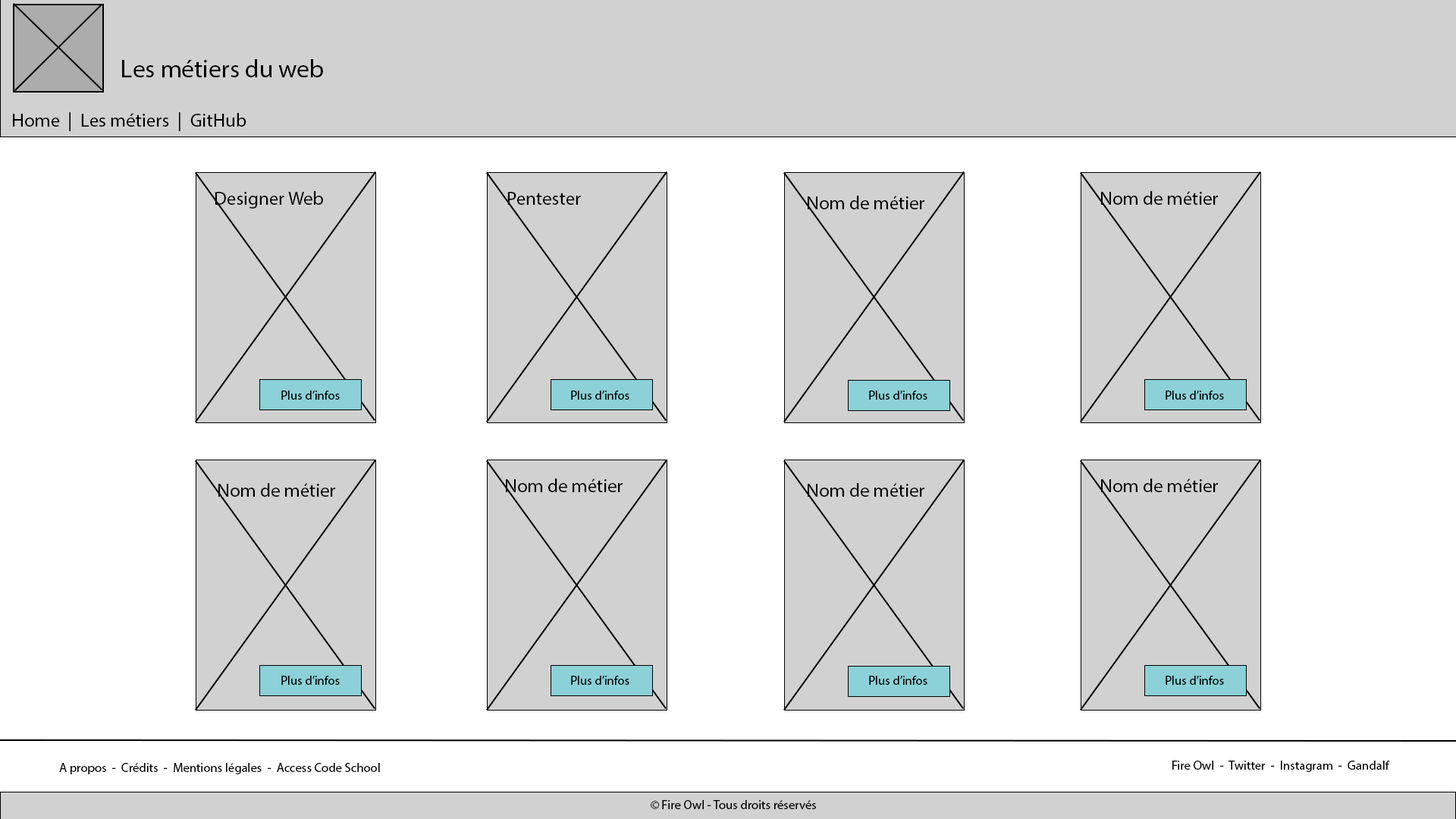
<style>
.page{position:relative;width:1456px;height:819px;background:#ffffff}
.page>*{position:absolute;margin:0}
.t1{font:25.3px "MyriadPro-Regular";color:#000000}
.t2{font:19px "MyriadPro-Regular";color:#000000}
.t3{font:12.6px "MyriadPro-Regular";color:#000000}
</style>
<div class="page">
<p class="t1" style="left:122px;top:59px;width:201px;height:18px">Les métiers du web</p>
<p class="t2" style="left:13px;top:112px;width:233px;height:19px">Home  |  Les métiers  |  GitHub</p>
<p class="t2" style="left:215px;top:191px;width:108px;height:18px">Designer Web</p>
<p class="t2" style="left:507px;top:192px;width:74px;height:13px">Pentester</p>
<p class="t2" style="left:808px;top:196px;width:116px;height:13px">Nom de métier</p>
<p class="t2" style="left:1101px;top:191px;width:117px;height:14px">Nom de métier</p>
<p class="t3" style="left:281px;top:391px;width:59px;height:9px">Plus d’infos</p>
<p class="t3" style="left:571px;top:391px;width:58px;height:9px">Plus d’infos</p>
<p class="t3" style="left:869px;top:391px;width:58px;height:9px">Plus d’infos</p>
<p class="t3" style="left:1166px;top:391px;width:58px;height:9px">Plus d’infos</p>
<p class="t2" style="left:218px;top:483px;width:117px;height:14px">Nom de métier</p>
<p class="t2" style="left:506px;top:479px;width:117px;height:13px">Nom de métier</p>
<p class="t2" style="left:808px;top:483px;width:116px;height:14px">Nom de métier</p>
<p class="t2" style="left:1101px;top:479px;width:117px;height:13px">Nom de métier</p>
<p class="t3" style="left:281px;top:676px;width:59px;height:9px">Plus d’infos</p>
<p class="t3" style="left:571px;top:676px;width:58px;height:9px">Plus d’infos</p>
<p class="t3" style="left:869px;top:676px;width:58px;height:9px">Plus d’infos</p>
<p class="t3" style="left:1166px;top:676px;width:58px;height:9px">Plus d’infos</p>
<p class="t3" style="left:1172px;top:761px;width:218px;height:11px">Fire Owl  -  Twitter  -  Instagram  -  Gandalf</p>
<p class="t3" style="left:59px;top:763px;width:321px;height:11px">A propos  -  Crédits  -  Mentions légales  -  Access Code School</p>
<p class="t3" style="left:651px;top:800px;width:165px;height:9px">© Fire Owl - Tous droits réservés</p>
</div>
